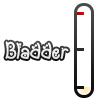
<style>
.page{position:relative;width:100px;height:100px;background:#ffffff}
.page>*{position:absolute;margin:0}
.t1{font:24px "MyLoveLetterRegular";letter-spacing:0.01em;color:#efefee}
</style>
<div class="page">
<p class="t1" style="left:5px;top:41px;width:64px;height:18px">Bladder</p>
</div>
